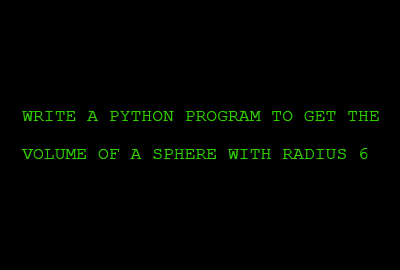
<style>
.page{position:relative;width:400px;height:270px;background:#000000}
.page>*{position:absolute;margin:0}
.t1{font:18.1px/37.5px "CourierNewPSMT";color:#30cc00;text-transform:uppercase}
</style>
<div class="page">
<p class="t1" style="left:22px;top:111px;width:357px;height:48px">Write a python program to get the <br>volume of a sphere with radius 6</p>
</div>
